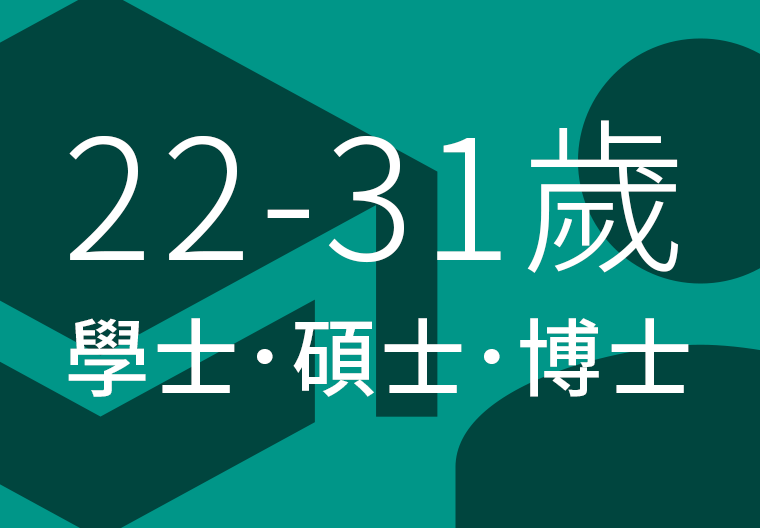
<style>
.page{position:relative;width:760px;height:528px;background:#00453e}
.page>*{position:absolute;margin:0}
.t1{font:167.6px "NotoSansCJKtc-Light";letter-spacing:0.05em;color:#ffffff;text-transform:uppercase}
.t2{font:85.5px "NotoSansCJKtc-Medium";letter-spacing:0.05em;color:#ffffff;text-transform:uppercase}
</style>
<div class="page">
<p class="t1" style="left:69px;top:120px;width:610px;height:153px">22-31歲</p>
<p class="t2" style="left:68px;top:318px;width:621px;height:79px">學士．碩士．博士</p>
</div>
